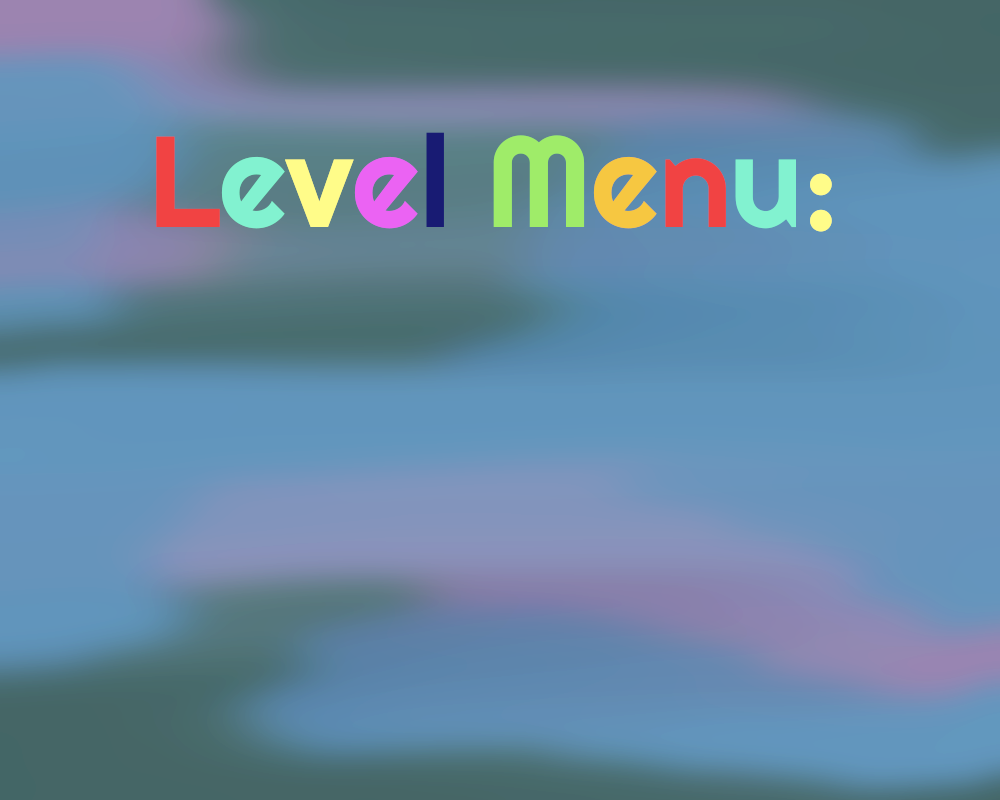
<style>
.page{position:relative;width:1000px;height:800px}
.page>*{position:absolute;margin:0}
.t1{font:128.8px "Righteous-Regular";color:#e04646}
.t2{font:128.8px "Righteous-Regular";color:#76e2b5}
.t3{font:128.8px "Righteous-Regular";color:#fff77b}
.t4{font:128.8px "Righteous-Regular";color:#d65fe4}
.t5{font:128.8px "Righteous-Regular";color:#1d216b}
.t6{font:128.8px "Righteous-Regular";color:#8cd763}
.t7{font:128.8px "Righteous-Regular";color:#eaad44}
</style>
<div class="page">
<p class="t1" style="left:156px;top:132px;width:676px;height:100px">L<span class="t2">e</span><span class="t3">v</span><span class="t4">e</span><span class="t5">l </span><span class="t6">M</span><span class="t7">e</span>n<span class="t2">u</span><span class="t3">:</span></p>
</div>
